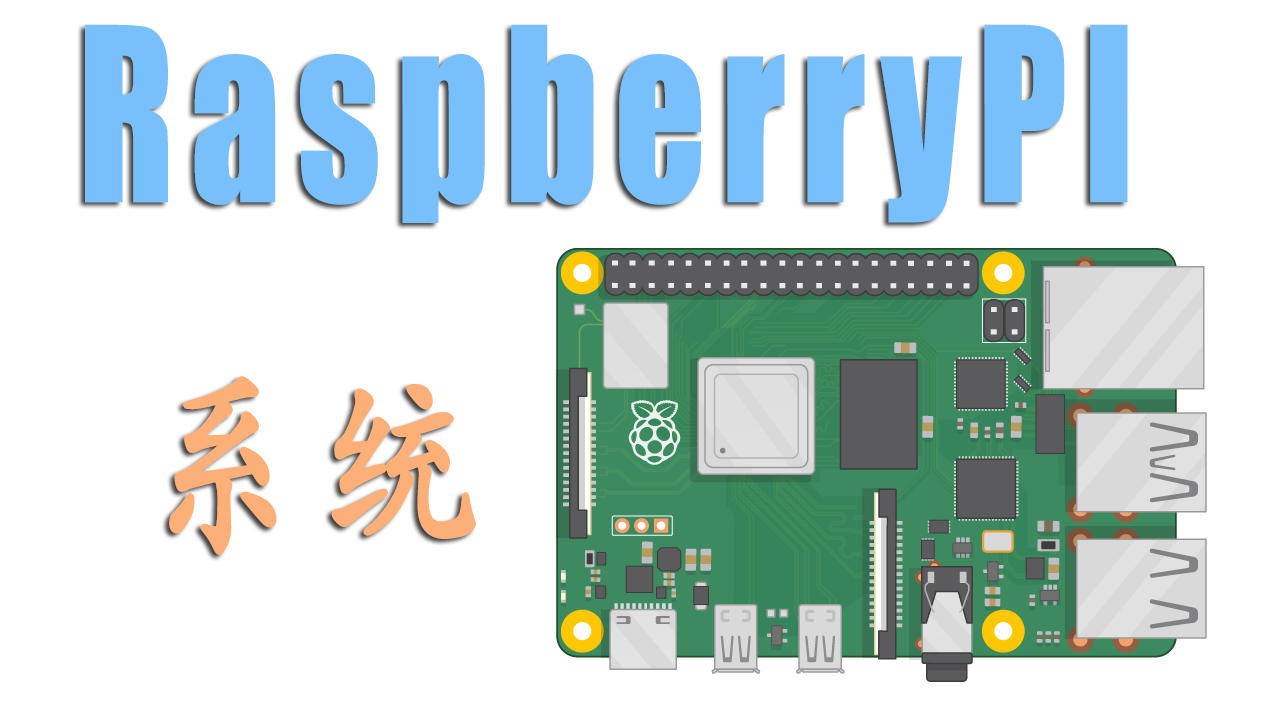
<style>
.page{position:relative;width:1280px;height:720px;background:#ffffff}
.page>*{position:absolute;margin:0}
.t1{font:224.1px "Impact";letter-spacing:0.06em;color:#78c0fb;font-weight:bold;scale:0.8 1}
.t2{font:199.4px "STKaiti";letter-spacing:0.06em;color:#fcaf77;font-weight:bold;scale:0.8 1}
</style>
<div class="page">
<p class="t1" style="left:85px;top:24px;width:1043px;height:199px">RaspberryPI</p>
<p class="t2" style="left:169px;top:376px;width:307px;height:179px">系统</p>
</div>
